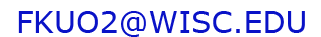
<style>
.page{position:relative;width:321px;height:37px;background:#ffffff}
.page>*{position:absolute;margin:0}
.t1{font:30px "Verdana";color:#0912c7}
</style>
<div class="page">
<p class="t1" style="left:18px;top:11px;width:287px;height:26px">FKUO2@WISC.EDU</p>
</div>
